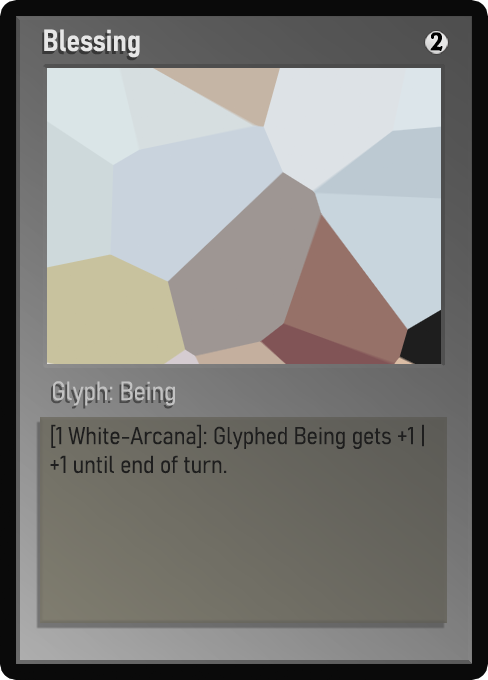
<style>
.page{position:relative;width:488px;height:680px}
.page>*{position:absolute;margin:0}
.t1{font:30px "Bahnschrift-SemiBoldSemiCondensed";color:#f2f2f2;font-weight:bold}
.t2{font:25px "WTRRoycroft";color:#000000;font-weight:bold;scale:1.09 1}
.t3{font:26px "Bahnschrift-LightSemiCondensed";color:#c8c8c8;font-weight:bold}
.t4{font:24px "Bahnschrift-LightSemiCondensed";color:#1e1e1e;font-weight:bold}
</style>
<div class="page">
<p class="t1" style="left:44px;top:29px;width:96px;height:29px;opacity:0.9">Blessing</p>
<p class="t2" style="left:430px;top:32px;width:13px;height:19px">2</p>
<p class="t3" style="left:53px;top:381px;width:122px;height:25px;opacity:0.9">Glyph: Being</p>
<p class="t4" style="left:50px;top:424px;width:374px;height:50px">[1 White-Arcana]: Glyphed Being gets +1 | +1 until end of turn.</p>
</div>
